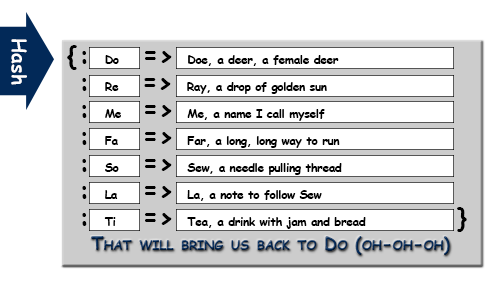
<style>
.page{position:relative;width:500px;height:282px;background:#ffffff}
.page>*{position:absolute;margin:0}
.t1{font:19.5px "ComicSansMS-Bold";color:#fffefe}
.t2{font:26px "ComicSansMS-Bold";letter-spacing:-0.025em;color:#000000}
.t3{font:11.7px "ComicSansMS-Bold";letter-spacing:-0.025em;color:#000000}
.t4{font:18px "ComicSansMS-Bold";font-variant:small-caps}
</style>
<div class="page">
<p class="t1" style="left:11px;top:39px;width:16px;height:46px;rotate:90deg">Hash</p>
<p class="t2" style="left:67px;top:45px;width:10px;height:25px">{</p>
<p class="t3" style="left:82px;top:51px;width:257px;height:15px"><span class="t2"> :  </span>Do  <span class="t2">=&gt;</span>   Doe, a deer, a female deer</p>
<p class="t3" style="left:82px;top:78px;width:245px;height:16px"><span class="t2"> :  </span>Re     <span class="t2">=&gt;</span>   Ray, a drop of golden sun</p>
<p class="t3" style="left:82px;top:105px;width:243px;height:16px"><span class="t2"> :  </span>Me   <span class="t2">=&gt;</span>   Me, a name I call myself</p>
<p class="t3" style="left:82px;top:132px;width:258px;height:16px"><span class="t2"> :  </span>Fa  <span class="t2">=&gt;</span>   Far, a long, long way to run</p>
<p class="t3" style="left:82px;top:159px;width:260px;height:16px"><span class="t2"> :  </span>So  <span class="t2">=&gt;</span>   Sew, a needle pulling thread</p>
<p class="t3" style="left:82px;top:186px;width:240px;height:15px"><span class="t2"> :  </span>La  <span class="t2">=&gt;</span>   La, a note to follow Sew</p>
<p class="t2" style="left:457px;top:207px;width:10px;height:25px">}</p>
<p class="t3" style="left:82px;top:213px;width:284px;height:16px"><span class="t2"> :  </span>Ti  <span class="t2">=&gt;</span>   Tea, a drink with jam and bread</p>
<p class="t4" style="left:91px;top:236px;width:359px;height:19px">That will bring us back to Do (oh-oh-oh)</p>
</div>
